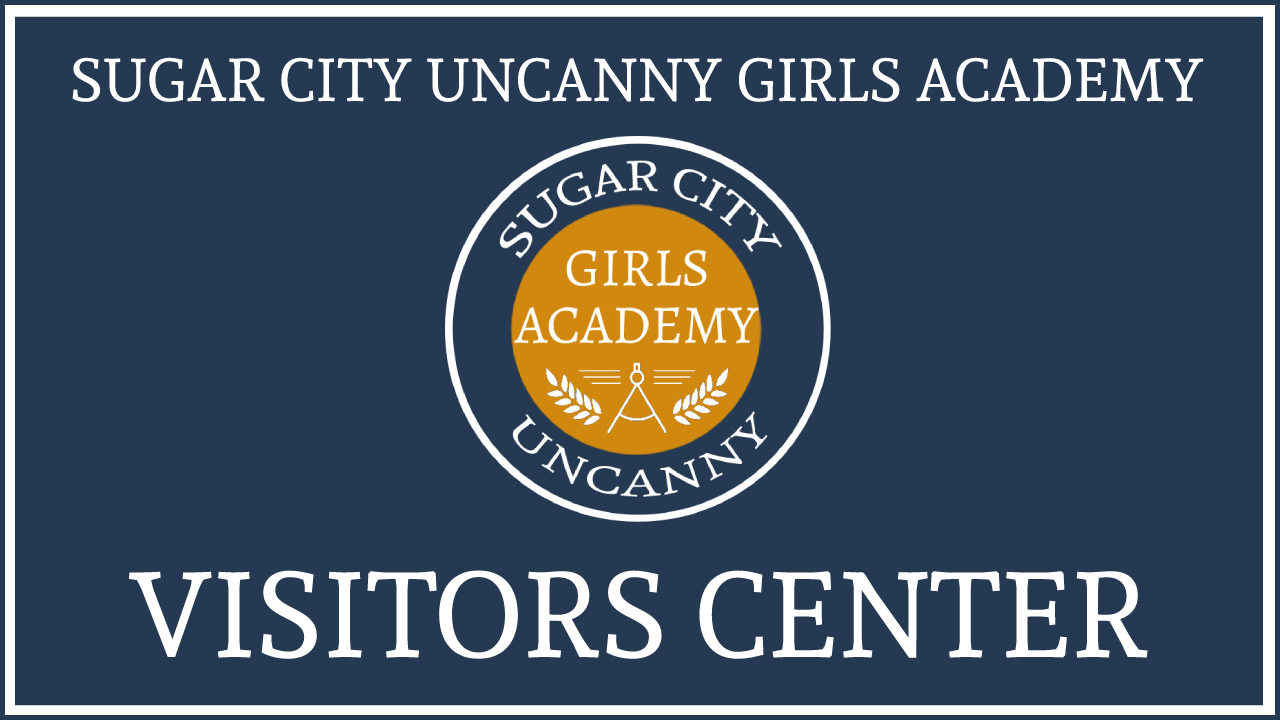
<style>
.page{position:relative;width:1280px;height:720px;background:#253952}
.page>*{position:absolute;margin:0}
.t1{font:60px "AndadaSC-Regular";color:#ffffff}
.t2{font:120px "AndadaSC-Regular";color:#ffffff}
</style>
<div class="page">
<p class="t1" style="left:72px;top:57px;width:1132px;height:45px">SUGAR CITY UNCANNY GIRLS ACADEMY</p>
<p class="t2" style="left:128px;top:570px;width:1020px;height:89px">VISITORS CENTER</p>
</div>
